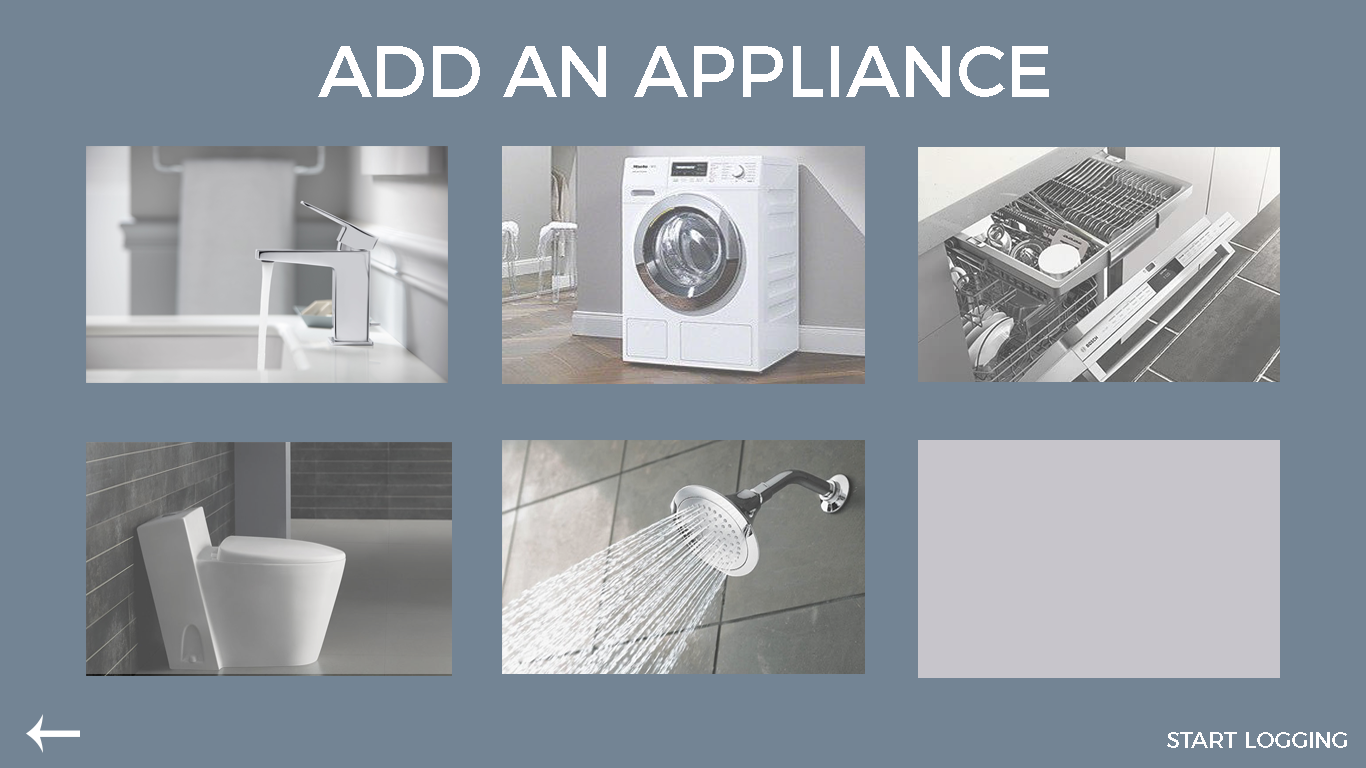
<style>
.page{position:relative;width:1366px;height:768px;background:#738494}
.page>*{position:absolute;margin:0}
.t1{font:73px "Montserrat-Regular";color:#fffefe;text-transform:uppercase}
.t2{font:23px "Montserrat-Regular";color:#fffefe;text-transform:uppercase}
</style>
<div class="page">
<p class="t1" style="left:318px;top:46px;width:731px;height:51px">Add an appliance</p>
<p class="t2" style="left:1167px;top:732px;width:180px;height:16px">start logging</p>
</div>
